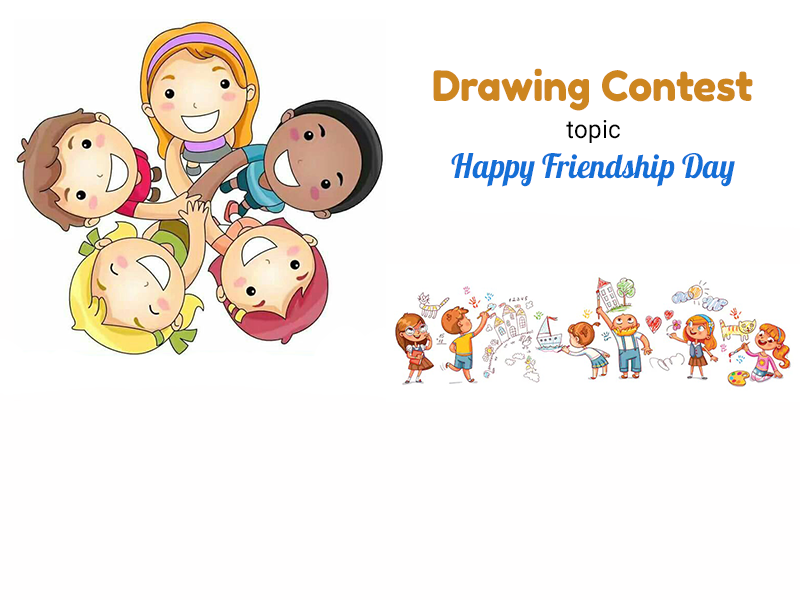
<style>
.page{position:relative;width:800px;height:600px;background:#fffefe}
.page>*{position:absolute;margin:0}
.t1{font:41.7px "FredokaOne-Regular";color:#cd8620;scale:0.97 1}
.t2{font:25px "Roboto-Regular";color:#000000;scale:0.97 1}
.t3{font:33.3px "Lobster-Regular";color:#146fd6;scale:0.97 1}
</style>
<div class="page">
<p class="t1" style="left:433px;top:68px;width:320px;height:43px">Drawing Contest</p>
<p class="t2" style="left:566px;top:120px;width:54px;height:23px">topic</p>
<p class="t3" style="left:451px;top:153px;width:284px;height:34px">Happy Friendship Day</p>
</div>
